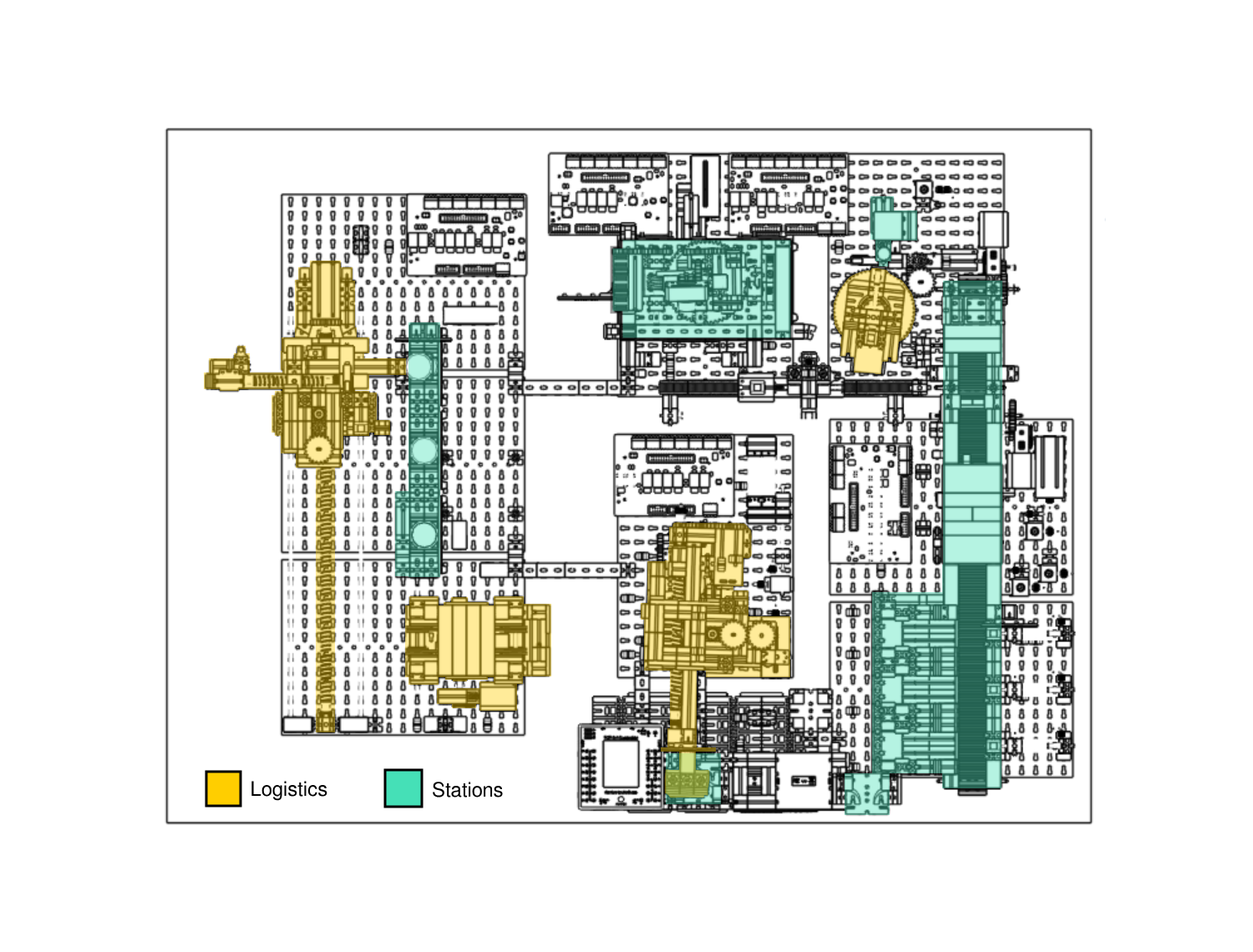
<style>
.page{position:relative;width:1253px;height:952px;background:#ffffff}
.page>*{position:absolute;margin:0}
.t1{font:20px "FreeSans";color:#000000}
</style>
<div class="page">
<p class="t1" style="left:251px;top:781px;width:76px;height:20px">Logistics</p>
<p class="t1" style="left:433px;top:782px;width:70px;height:15px">Stations</p>
</div>
